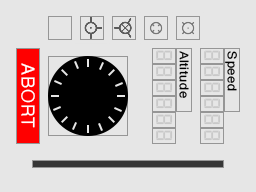
<style>
.page{position:relative;width:256px;height:192px;background:#e6e6e6}
.page>*{position:absolute;margin:0}
.t1{font:24px "Digital-7Mono";letter-spacing:0.05em;color:#c9c9c9}
.t2{font:12px "Helvetica";letter-spacing:0.05em;color:#000000;scale:1.07 1}
.t3{font:18px "Helvetica";letter-spacing:0.05em;color:#ffffff}
</style>
<div class="page">
<p class="t1" style="left:156px;top:50px;width:17px;height:11px;rotate:90deg">8</p>
<p class="t2" style="left:179px;top:51px;width:10px;height:47px;rotate:90deg">Altitude</p>
<p class="t1" style="left:204px;top:50px;width:17px;height:11px;rotate:90deg">8</p>
<p class="t2" style="left:225px;top:51px;width:12px;height:40px;rotate:90deg">Speed</p>
<p class="t3" style="left:21px;top:63px;width:14px;height:65px;rotate:90deg">ABORT</p>
<p class="t1" style="left:156px;top:66px;width:17px;height:11px;rotate:90deg">8</p>
<p class="t1" style="left:204px;top:66px;width:17px;height:11px;rotate:90deg">8</p>
<p class="t1" style="left:156px;top:82px;width:17px;height:11px;rotate:90deg">8</p>
<p class="t1" style="left:204px;top:82px;width:17px;height:11px;rotate:90deg">8</p>
<p class="t1" style="left:156px;top:98px;width:17px;height:11px;rotate:90deg">8</p>
<p class="t1" style="left:204px;top:98px;width:17px;height:11px;rotate:90deg">8</p>
<p class="t1" style="left:156px;top:114px;width:17px;height:11px;rotate:90deg">8</p>
<p class="t1" style="left:204px;top:114px;width:17px;height:11px;rotate:90deg">8</p>
<p class="t1" style="left:156px;top:130px;width:17px;height:11px;rotate:90deg">8</p>
<p class="t1" style="left:204px;top:130px;width:17px;height:11px;rotate:90deg">8</p>
</div>
